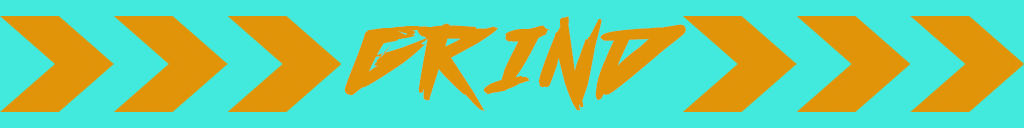
<style>
.page{position:relative;width:1024px;height:128px;background:#42eadd}
.page>*{position:absolute;margin:0}
.t1{font:80px "Outrunfuture-Bold";color:#e19408}
</style>
<div class="page">
<p class="t1" style="left:344px;top:16px;width:342px;height:96px">GRIND</p>
</div>
